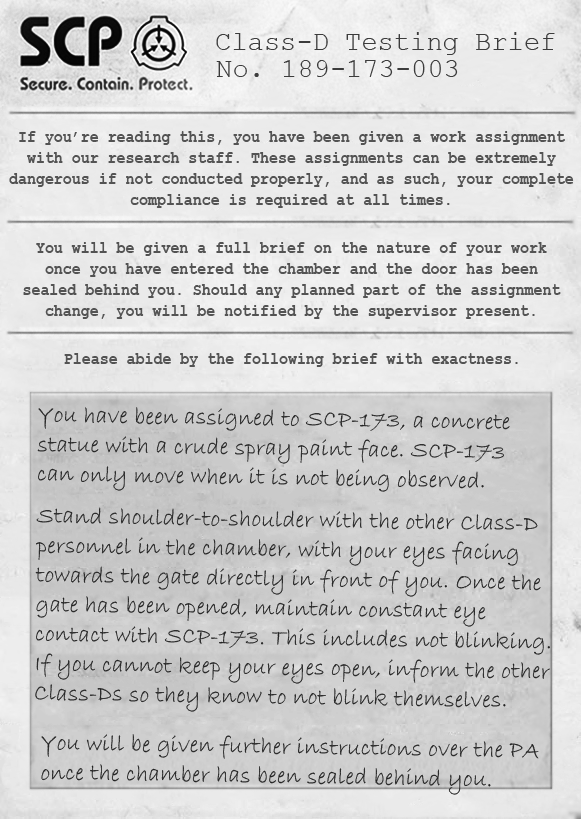
<style>
.page{position:relative;width:581px;height:819px}
.page>*{position:absolute;margin:0}
.t1{font:27.4px "CourierNewPSMT";letter-spacing:0.01em;color:#3c3c3c}
.t2{font:16.7px/10.5px "CourierNewPS-BoldMT";letter-spacing:0.01em;color:#535353;scale:0.88 1}
.t3{font:16.7px "CourierNewPS-BoldMT";letter-spacing:0.01em;color:#535353;scale:0.88 1}
.t4{font:23.6px/14.8px "BradleyHandITC";letter-spacing:0.01em;color:#222222}
</style>
<div class="page">
<p class="t1" style="left:216px;top:32px;width:339px;height:23px">Class-D Testing Brief</p>
<p class="t1" style="left:216px;top:60px;width:242px;height:17px">No. 189-173-003</p>
<p class="t2" style="left:9px;top:131px;width:565px;height:77px;text-align:center">If you’re reading this, you have been given a work assignment<br><br>with our research staff. These assignments can be extremely<br><br>dangerous if not conducted properly, and as such, your complete<br><br>compliance is required at all times.</p>
<p class="t2" style="left:23px;top:242px;width:538px;height:77px;text-align:center">You will be given a full brief on the nature of your work<br><br>once you have entered the chamber and the door has been<br><br>sealed behind you. Should any planned part of the assignment<br><br>change, you will be notified by the supervisor present.</p>
<p class="t3" style="left:64px;top:353px;width:454px;height:14px">Please abide by the following brief with exactness.</p>
<p class="t4" style="left:37px;top:407px;width:473px;height:85px;rotate:1deg">You have been assigned to SCP-173, a concrete<br><br>statue with a crude spray paint face. SCP-173<br><br>can only move when it is not being observed.</p>
<p class="t4" style="left:35px;top:507px;width:515px;height:205px;rotate:1deg">Stand shoulder-to-shoulder with the other Class-D<br><br>personnel in the chamber, with your eyes facing<br><br>towards the gate directly in front of you. Once the<br><br>gate has been opened, maintain constant eye<br><br>contact with SCP-173. This includes not blinking.<br><br>If you cannot keep your eyes open, inform the other<br><br>Class-Ds so they know to not blink themselves.</p>
<p class="t4" style="left:41px;top:734px;width:498px;height:61px;rotate:1deg">You will be given further instructions over the PA<br><br>once the chamber has been sealed behind you.</p>
</div>
